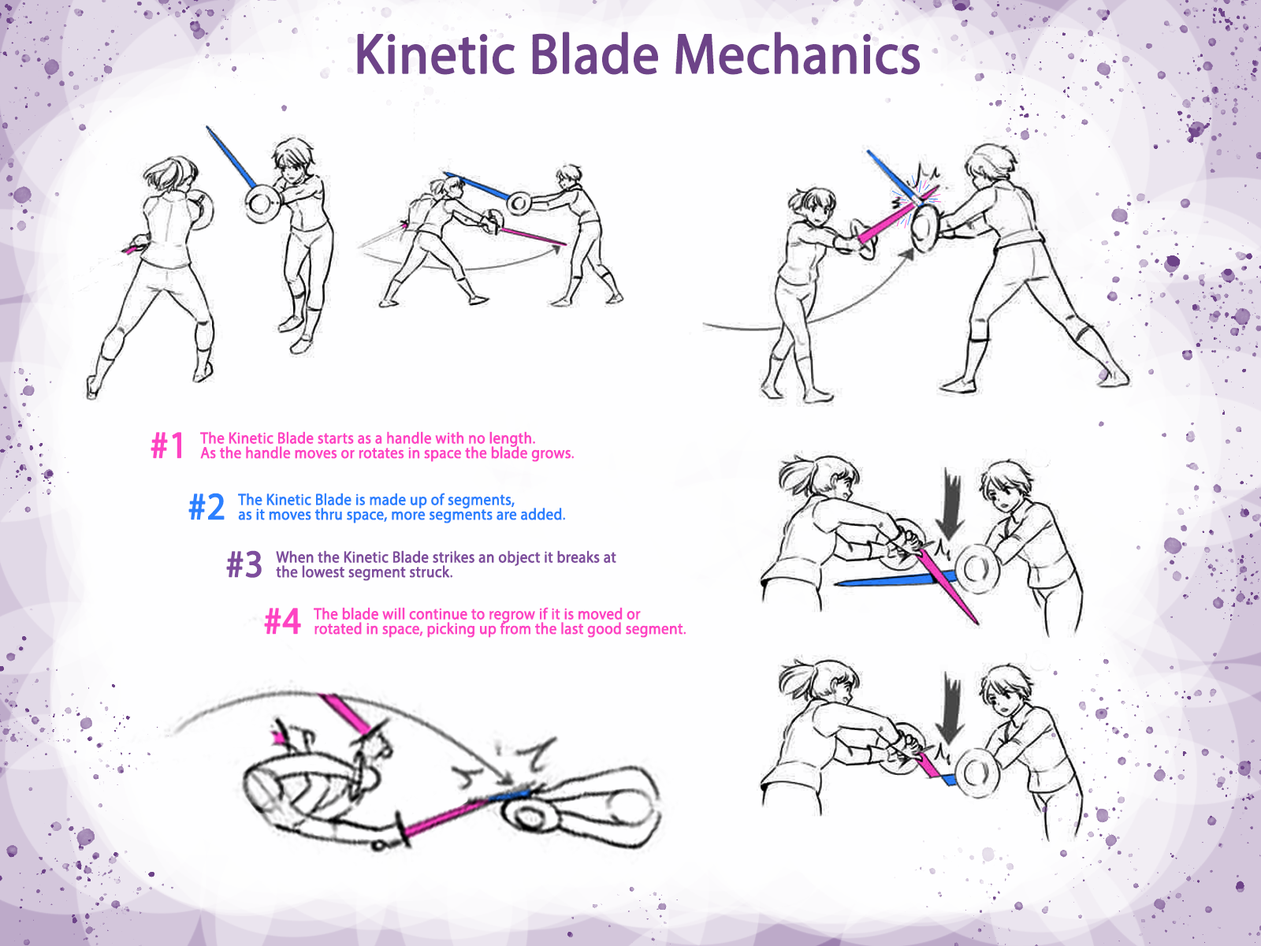
<style>
.page{position:relative;width:1261px;height:946px;background:#fefeff}
.page>*{position:absolute;margin:0}
.t1{font:56.7px "MyriadPro-Regular";color:#6d4388;font-weight:bold;scale:0.94 1}
.t2{font:38.3px "MyriadPro-Regular";color:#ff43c3;font-weight:bold;scale:0.94 1}
.t3{font:15.9px/14.7px "MyriadPro-Regular";color:#ff43c3;font-weight:bold;scale:0.94 1}
.t4{font:38.3px "MyriadPro-Regular";color:#2b80ff;font-weight:bold;scale:0.94 1}
.t5{font:15.9px/14.7px "MyriadPro-Regular";color:#2b80ff;font-weight:bold;scale:0.94 1}
.t6{font:38.3px "MyriadPro-Regular";color:#7e4d9d;font-weight:bold;scale:0.94 1}
.t7{font:15.9px/14.7px "MyriadPro-Regular";color:#7e4d9d;font-weight:bold;scale:0.94 1}
</style>
<div class="page">
<p class="t1" style="left:357px;top:32px;width:563px;height:43px">Kinetic Blade Mechanics</p>
<p class="t2" style="left:151px;top:432px;width:30px;height:27px">#1</p>
<p class="t3" style="left:200px;top:431px;width:375px;height:31px">The Kinetic Blade starts as a handle with no length.<br>As the handle moves or rotates in space the blade grows.</p>
<p class="t4" style="left:188px;top:493px;width:37px;height:27px">#2</p>
<p class="t5" style="left:238px;top:493px;width:328px;height:30px">The Kinetic Blade is made up of segments, <br>as it moves thru space, more segments are added.</p>
<p class="t6" style="left:226px;top:550px;width:36px;height:28px">#3</p>
<p class="t7" style="left:276px;top:550px;width:340px;height:31px">When the Kinetic Blade strikes an object it breaks at <br>the lowest segment struck.</p>
<p class="t2" style="left:264px;top:608px;width:37px;height:26px">#4</p>
<p class="t3" style="left:314px;top:607px;width:372px;height:31px">The blade will continue to regrow if it is moved or<br>rotated in space, picking up from the last good segment.</p>
</div>
